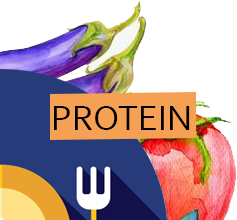
<style>
.page{position:relative;width:237px;height:220px;background:#ffffff}
.page>*{position:absolute;margin:0}
.t1{font:36px "Corbel";color:#000000}
</style>
<div class="page">
<p class="t1" style="left:54px;top:106px;width:136px;height:24px">PROTEIN</p>
</div>
